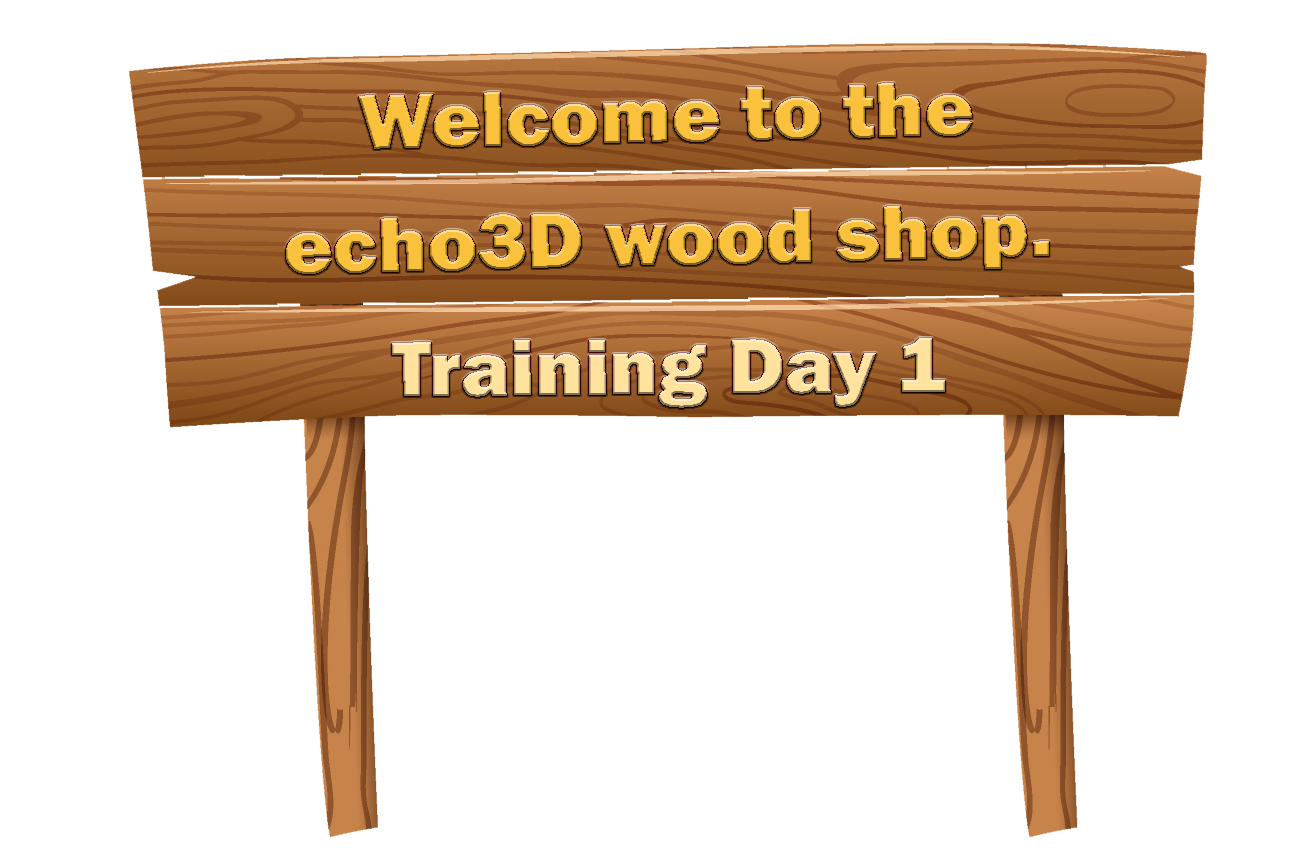
<style>
.page{position:relative;width:1290px;height:865px;background:#ffffff}
.page>*{position:absolute;margin:0}
.t1{font:79.8px "FranklinGothic-Heavy";color:#f9c13c;scale:1.05 1}
.t2{font:79.8px "FranklinGothic-Heavy";color:#ffe29d;scale:1.05 1}
</style>
<div class="page">
<p class="t1" style="left:359px;top:83px;width:613px;height:66px;rotate:-1deg">Welcome to the</p>
<p class="t1" style="left:286px;top:206px;width:763px;height:68px;rotate:-1deg">echo3D wood shop.</p>
<p class="t2" style="left:392px;top:338px;width:553px;height:70px">Training Day 1</p>
</div>
